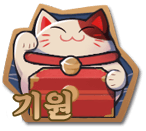
<style>
.page{position:relative;width:146px;height:131px;background:#ffffff}
.page>*{position:absolute;margin:0}
.t1{font:31.7px "SDKukdetopokki-bBd";letter-spacing:0.08em;color:#d8ac7b}
</style>
<div class="page">
<p class="t1" style="left:14px;top:90px;width:57px;height:30px">기원</p>
</div>
